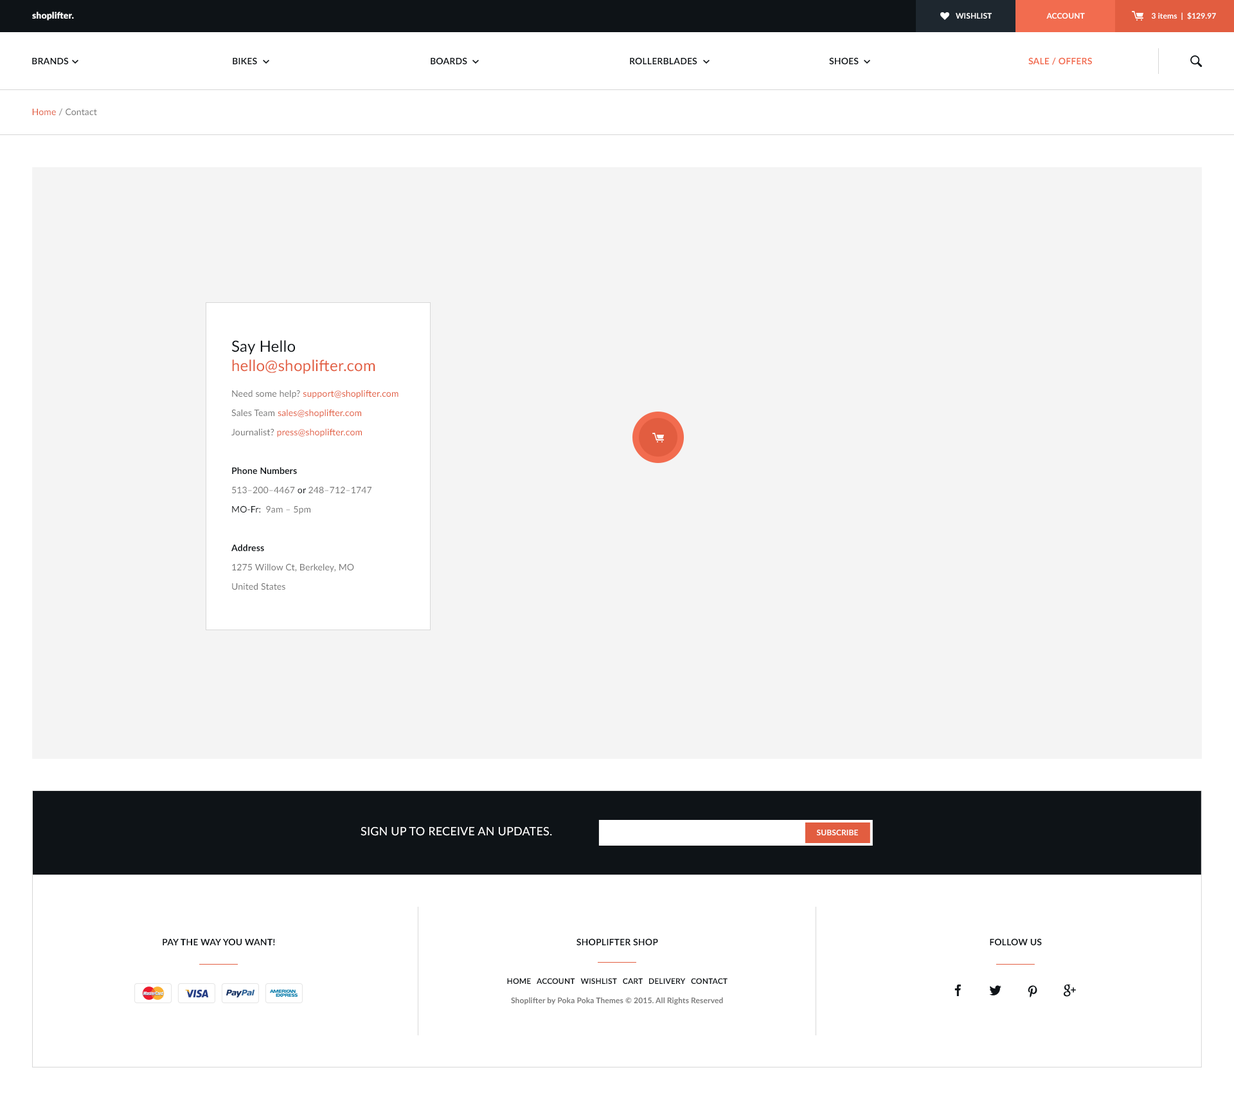
<style>
.page{position:relative;width:1234px;height:1099px;background:#f4f4f4}
.page>*{position:absolute;margin:0}
.t1{font:9px "Lato-Black";letter-spacing:0.01em;color:#ffffff}
.t2{font:7.7px "Lato-Bold";letter-spacing:0.01em;color:#ffffff;text-transform:uppercase}
.t3{font:7.7px "Lato-Bold";letter-spacing:0.01em;color:#ffffff}
.t4{font:9px "Lato-Bold";letter-spacing:0.01em;color:#0e1317;text-transform:uppercase}
.t5{font:9px "Lato-Bold";letter-spacing:0.01em;color:#f26c4f;text-transform:uppercase}
.t6{font:9px "Lato-Regular";letter-spacing:0.01em;color:#767676}
.t7{font:9px "Lato-Regular";letter-spacing:0.01em;color:#e25d40}
.t8{font:9px/19.3px "Lato-Regular";letter-spacing:0.01em;color:#767676}
.t9{font:15.4px/19.3px "Lato-Regular";letter-spacing:0.01em;color:#0e1317}
.t10{font:15.4px/19.3px "Lato-Regular";letter-spacing:0.01em;color:#e25d40}
.t11{font:9px/6.4px "Lato-Regular";letter-spacing:0.01em;color:#767676}
.t12{font:9px/6.4px "Lato-Regular";letter-spacing:0.01em;color:#e25d40}
.t13{font:9px/19.3px "Lato-Regular";letter-spacing:0.01em;color:#e25d40}
.t14{font:9px/19.3px "Lato-Bold";letter-spacing:0.01em;color:#0e1317}
.t15{font:9px/19.3px "Lato-Regular";letter-spacing:0.01em;color:#0e1317}
.t16{font:11.6px "Lato-Regular";letter-spacing:0.01em;color:#ffffff;text-transform:uppercase}
.t17{font:7.7px/19.3px "Lato-Bold";letter-spacing:0.01em;color:#767676}
.t18{font:9px/19.3px "Lato-Bold";letter-spacing:0.01em;color:#0e1317;text-transform:uppercase}
.t19{font:7.7px/19.3px "Lato-Bold";letter-spacing:0.01em;color:#0e1317;text-transform:uppercase}
</style>
<div class="page">
<p class="t1" style="left:32px;top:12px;width:42px;height:9px">shoplifter.</p>
<p class="t2" style="left:956px;top:13px;width:36px;height:6px">wishlist</p>
<p class="t2" style="left:1047px;top:13px;width:38px;height:6px">Account</p>
<p class="t3" style="left:1152px;top:12px;width:64px;height:8px">3 items  |  $129.97</p>
<p class="t4" style="left:32px;top:57px;width:37px;height:7px">Brands</p>
<p class="t4" style="left:233px;top:57px;width:24px;height:7px">bikes</p>
<p class="t4" style="left:431px;top:57px;width:36px;height:7px">boards</p>
<p class="t4" style="left:630px;top:57px;width:68px;height:7px">rollerblades</p>
<p class="t4" style="left:829px;top:57px;width:30px;height:7px">shoes</p>
<p class="t5" style="left:1029px;top:57px;width:63px;height:8px">SALE / OFFERS</p>
<p class="t6" style="left:32px;top:108px;width:65px;height:8px"><span class="t7">Home</span> / Contact</p>
<p class="t8" style="left:231px;top:340px;width:168px;height:250px"><span class="t9">Say Hello<br></span><span class="t10">hello@shoplifter.com<br><br></span><span class="t11">Need some help? </span><span class="t12">support@shoplifter.com<br></span>Sales Team <span class="t13">sales@shoplifter.com<br></span>Journalist? <span class="t13">press@shoplifter.com<br><br></span><span class="t14">Phone Numbers<br></span>513–200–4467 <span class="t15">or</span> 248–712–1747<br><span class="t15">MO-Fr: </span> 9am – 5pm<br><br><span class="t14">Address<br></span>1275 Willow Ct, Berkeley, MO<br>United States</p>
<p class="t16" style="left:361px;top:827px;width:191px;height:9px">Sign up to receive an updates.</p>
<p class="t2" style="left:816px;top:829px;width:42px;height:6px">subscribe</p>
<p class="t4" style="left:163px;top:938px;width:112px;height:7px">Pay the way you want!</p>
<p class="t17" style="left:507px;top:938px;width:221px;height:67px;text-align:center"><span class="t18">Shoplifter shop<br><br></span><span class="t19">home   account   wishlist   cart   delivery   contact<br></span>Shoplifter by Poka Poka Themes © 2015. All Rights Reserved</p>
<p class="t4" style="left:990px;top:938px;width:52px;height:7px">Follow us</p>
</div>
